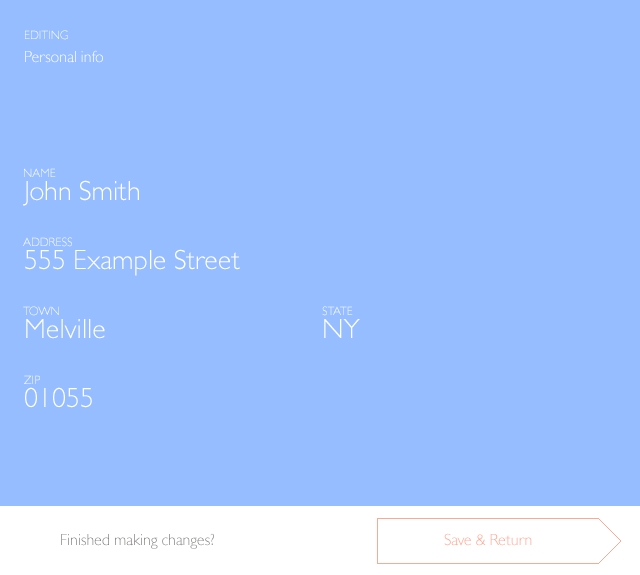
<style>
.page{position:relative;width:640px;height:575px;background:#95bdff}
.page>*{position:absolute;margin:0}
.t1{font:12px "GillSansMTPro-Light";color:#ffffff}
.t2{font:16px "GillSansMTPro-Light";color:#ffffff}
.t3{font:28px "GillSansMTPro-Light";color:#ffffff}
</style>
<div class="page">
<p class="t1" style="left:25px;top:30px;width:43px;height:10px">EDITING</p>
<p class="t2" style="left:25px;top:50px;width:78px;height:13px">Personal info</p>
<p class="t1" style="left:24px;top:168px;width:32px;height:9px">NAME</p>
<p class="t3" style="left:23px;top:180px;width:116px;height:26px">John Smith</p>
<p class="t1" style="left:23px;top:237px;width:49px;height:10px">ADDRESS</p>
<p class="t3" style="left:25px;top:249px;width:215px;height:27px">555 Example Street</p>
<p class="t1" style="left:23px;top:306px;width:36px;height:10px">TOWN</p>
<p class="t1" style="left:322px;top:306px;width:31px;height:10px">STATE</p>
<p class="t3" style="left:26px;top:319px;width:79px;height:20px">Melville</p>
<p class="t3" style="left:324px;top:319px;width:36px;height:19px">NY</p>
<p class="t1" style="left:24px;top:375px;width:16px;height:9px">ZIP</p>
<p class="t3" style="left:25px;top:387px;width:67px;height:21px">01055</p>
</div>
